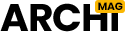
<style>
.page{position:relative;width:125px;height:32px;background:#ffffff}
.page>*{position:absolute;margin:0}
.t1{font:38.4px "Poppins-Bold";letter-spacing:-0.025em;color:#000000}
.t2{font:10.6px "Poppins-Bold";letter-spacing:-0.025em;color:#000000}
</style>
<div class="page">
<p class="t1" style="left:0px;top:3px;width:118px;height:29px">ARCHI</p>
<p class="t2" style="left:98px;top:2px;width:25px;height:8px">MAG</p>
</div>
